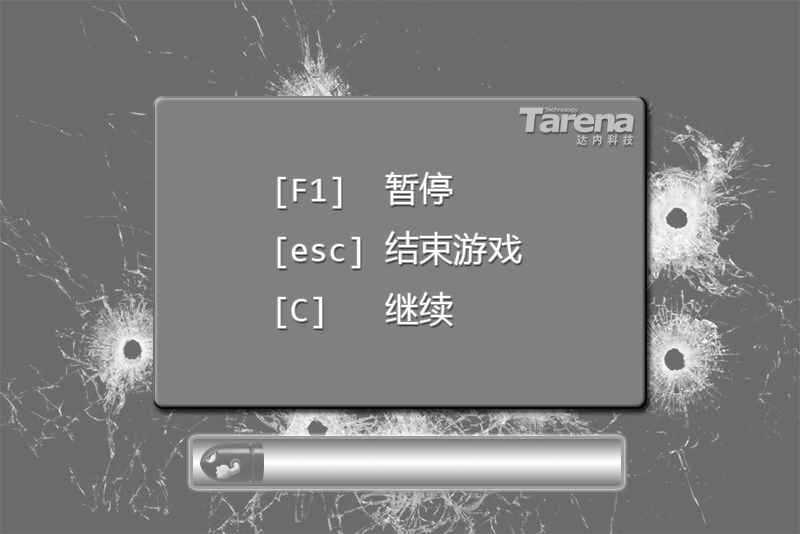
<style>
.page{position:relative;width:800px;height:534px;background:#6b6b6b}
.page>*{position:absolute;margin:0}
.t1{font:34.3px "Consolas";color:#fdfdfd}
.t2{font:34.3px "MicrosoftYaHei";color:#fdfdfd}
</style>
<div class="page">
<p class="t1" style="left:277px;top:172px;width:245px;height:156px">[F1]  <span class="t2">暂停<br></span>[esc] <span class="t2">结束游戏<br></span>[C]   <span class="t2">继续</span></p>
</div>
